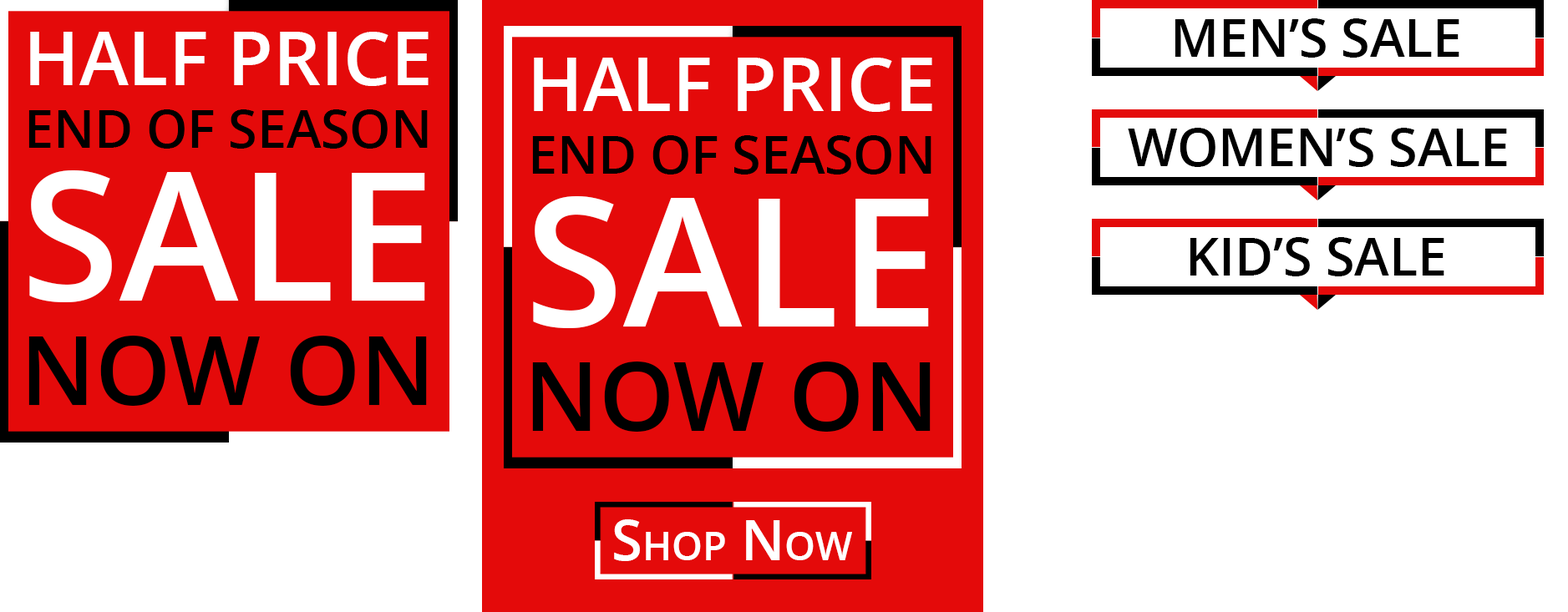
<style>
.page{position:relative;width:1568px;height:612px;background:#ffffff}
.page>*{position:absolute;margin:0}
.t1{font:52.2px "OpenSans-Semibold";color:#000000;text-transform:uppercase}
.t2{font:74.5px "OpenSans-Semibold";color:#ffffff;text-transform:uppercase}
.t3{font:179.3px/153.2px "OpenSans-Semibold";color:#ffffff;text-transform:uppercase}
.t4{font:95.7px/104.4px "OpenSans-Semibold";color:#000000;text-transform:uppercase}
.t5{font:55.7px "OpenSans-Semibold";color:#ffffff;font-variant:small-caps}
</style>
<div class="page">
<p class="t1" style="left:1175px;top:18px;width:284px;height:40px">Men’s Sale</p>
<p class="t1" style="left:28px;top:32px;width:401px;height:374px;text-align:center"><span class="t2">Half Price<br></span>End of Season<br><span class="t3">sale<br></span><span class="t4">Now On</span></p>
<p class="t1" style="left:532px;top:58px;width:400px;height:374px;text-align:center"><span class="t2">Half Price<br></span>End of Season<br><span class="t3">sale<br></span><span class="t4">Now On</span></p>
<p class="t1" style="left:1128px;top:128px;width:379px;height:39px">Women’s Sale</p>
<p class="t1" style="left:1190px;top:237px;width:254px;height:40px">kid’s Sale</p>
<p class="t5" style="left:614px;top:520px;width:238px;height:41px">Shop Now</p>
</div>
